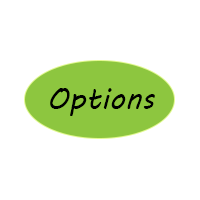
<style>
.page{position:relative;width:200px;height:200px;background:#ffffff}
.page>*{position:absolute;margin:0}
.t1{font:30px "MVBoli";color:#000000}
</style>
<div class="page">
<p class="t1" style="left:50px;top:88px;width:105px;height:28px">Options</p>
</div>
